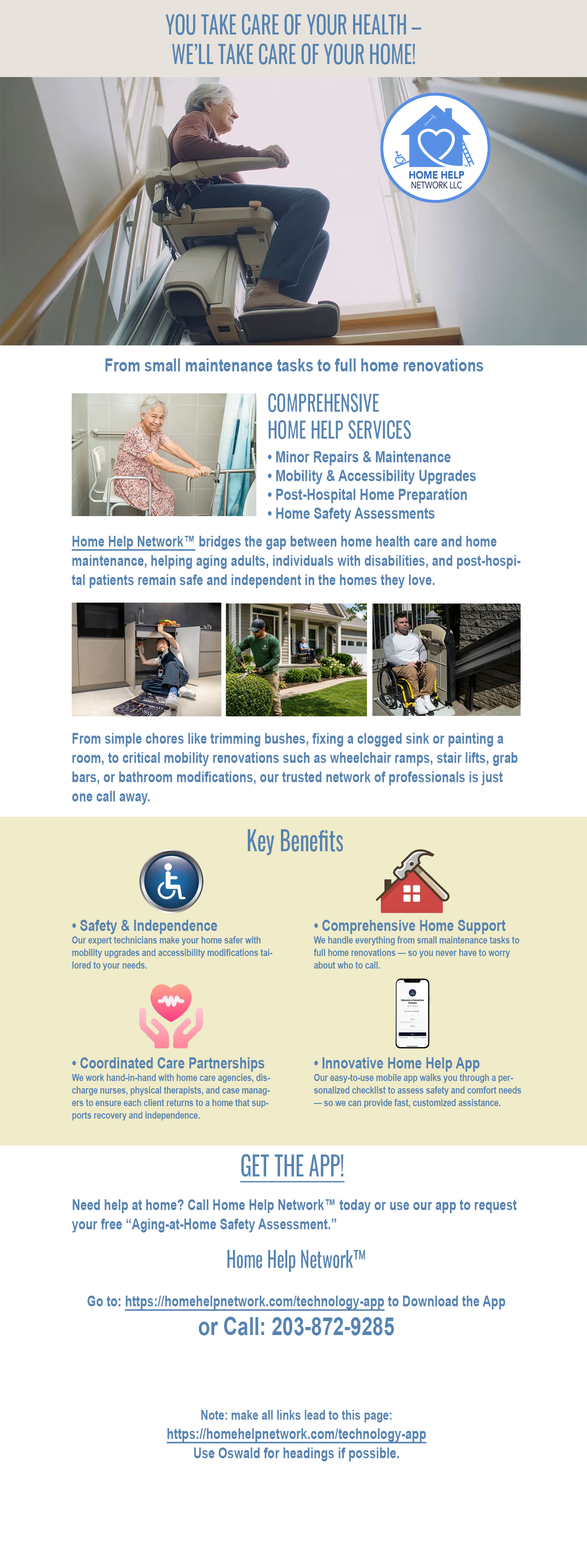
<style>
.page{position:relative;width:587px;height:1568px;background:#ffffff}
.page>*{position:absolute;margin:0}
.t1{font:24.6px "Oswald-Regular";color:#5784b2;scale:0.8 1}
.t2{font:17.9px "Arial-BoldMT";color:#5784b2;scale:0.8 1}
.t3{font:15.7px "Arial-BoldMT";color:#5784b2;scale:0.8 1}
.t4{font:22.4px "Oswald-Regular";color:#5784b2;scale:0.8 1}
.t5{font:15.7px/23.7px "Arial-BoldMT";color:#5784b2;scale:0.8 1}
.t6{font:26.9px "Oswald-Regular";color:#5784b2;scale:0.8 1}
.t7{font:9.8px/12.5px "Arial-BoldMT";color:#5784b2;scale:0.8 1}
.t8{font:26.9px "Oswald-Regular";color:#5784b2;text-decoration:underline;scale:0.8 1}
.t9{font:14.8px/19.3px "Arial-BoldMT";color:#5784b2;scale:0.8 1}
.t10{font:22px/19.3px "Oswald-Regular";color:#5784b2;scale:0.8 1}
.t11{font:14.8px/19.3px "Arial-BoldMT";color:#5784b2;text-decoration:underline;scale:0.8 1}
.t12{font:24.6px/28.7px "Arial-BoldMT";color:#5784b2;scale:0.8 1}
.t13{font:13.4px/23.7px "Arial-BoldMT";color:#5784b2;scale:0.8 1}
</style>
<div class="page">
<p class="t1" style="left:165px;top:14px;width:256px;height:51px;text-align:center">YOU TAKE CARE OF YOUR HEALTH – <br>WE’LL TAKE CARE OF YOUR HOME!</p>
<p class="t2" style="left:105px;top:358px;width:378px;height:13px">From small maintenance tasks to full home renovations</p>
<p class="t3" style="left:267px;top:393px;width:209px;height:129px"><span class="t4">COMPREHENSIVE<br>HOME HELP SERVICES<br></span><span class="t5">• Minor Repairs &amp; Maintenance<br></span>• Mobility &amp; Accessibility Upgrades<br>• Post-Hospital Home Preparation<br>• Home Safety Assessments</p>
<p class="t6" style="left:248px;top:829px;width:95px;height:26px">Key Benefits</p>
<p class="t7" style="left:72px;top:920px;width:200px;height:50px"><span class="t5">• Safety &amp; Independence<br></span>Our expert technicians make your home safer with<br>mobility upgrades and accessibility modifications tailored to your needs.</p>
<p class="t7" style="left:314px;top:920px;width:205px;height:49px"><span class="t5">• Comprehensive Home Support<br></span>We handle everything from small maintenance tasks to full home renovations — so you never have to worry about who to call.</p>
<p class="t7" style="left:72px;top:1057px;width:198px;height:63px"><span class="t5">• Coordinated Care Partnerships<br></span>We work hand-in-hand with home care agencies, discharge nurses, physical therapists, and case managers to ensure each client returns to a home that supports recovery and independence.</p>
<p class="t7" style="left:314px;top:1057px;width:207px;height:51px"><span class="t5">• Innovative Home Help App<br></span>Our easy-to-use mobile app walks you through a personalized checklist to assess safety and comfort needs — so we can provide fast, customized assistance.</p>
<p class="t8" style="left:240px;top:1154px;width:105px;height:29px">GET THE APP!</p>
<p class="t9" style="left:72px;top:1199px;width:445px;height:136px">Need help at home? Call Home Help Network™ today or use our app to request your free “Aging-at-Home Safety Assessment.”<br><br><span class="t10">Home Help Network™<br></span><br>Go to: <span class="t11">https://homehelpnetwork.com/technology-app</span> to Download the App <br><span class="t12">or Call: 203-872-9285</span></p>
<p class="t11" style="left:167px;top:1410px;width:259px;height:51px;text-align:center"><span class="t13">Note: make all links lead to this page:<br></span>https://homehelpnetwork.com/technology-app<br><span class="t9">Use Oswald for headings if possible.</span></p>
</div>
